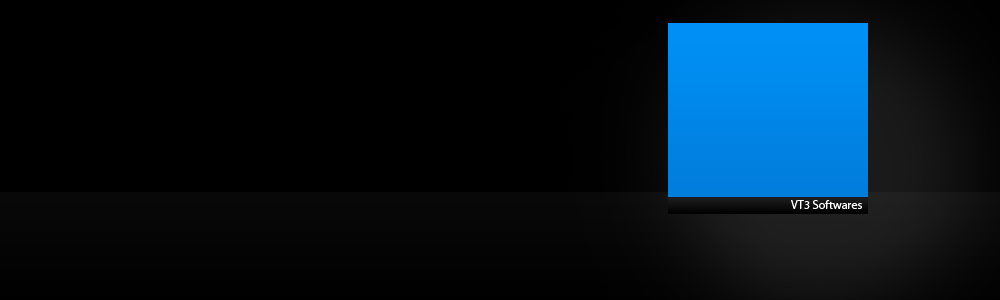
<style>
.page{position:relative;width:1000px;height:300px;background:#000000}
.page>*{position:absolute;margin:0}
.t1{font:12px "MyriadPro-Regular";color:#ffffff}
</style>
<div class="page">
<p class="t1" style="left:791px;top:200px;width:71px;height:9px">VT3 Softwares</p>
</div>
